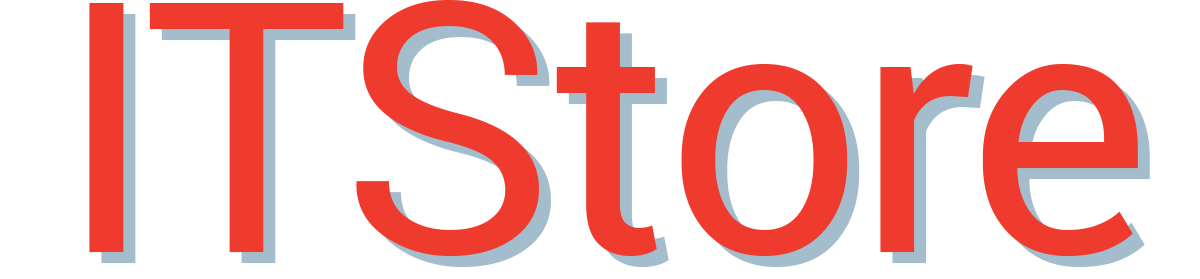
<style>
.page{position:relative;width:1200px;height:279px;background:#ffffff}
.page>*{position:absolute;margin:0}
.t1{font:350px "Roboto-Regular";letter-spacing:-0.02em}
</style>
<div class="page">
<p class="t1" style="left:101px;top:11px;width:1049px;height:256px">ITStore</p>
</div>
